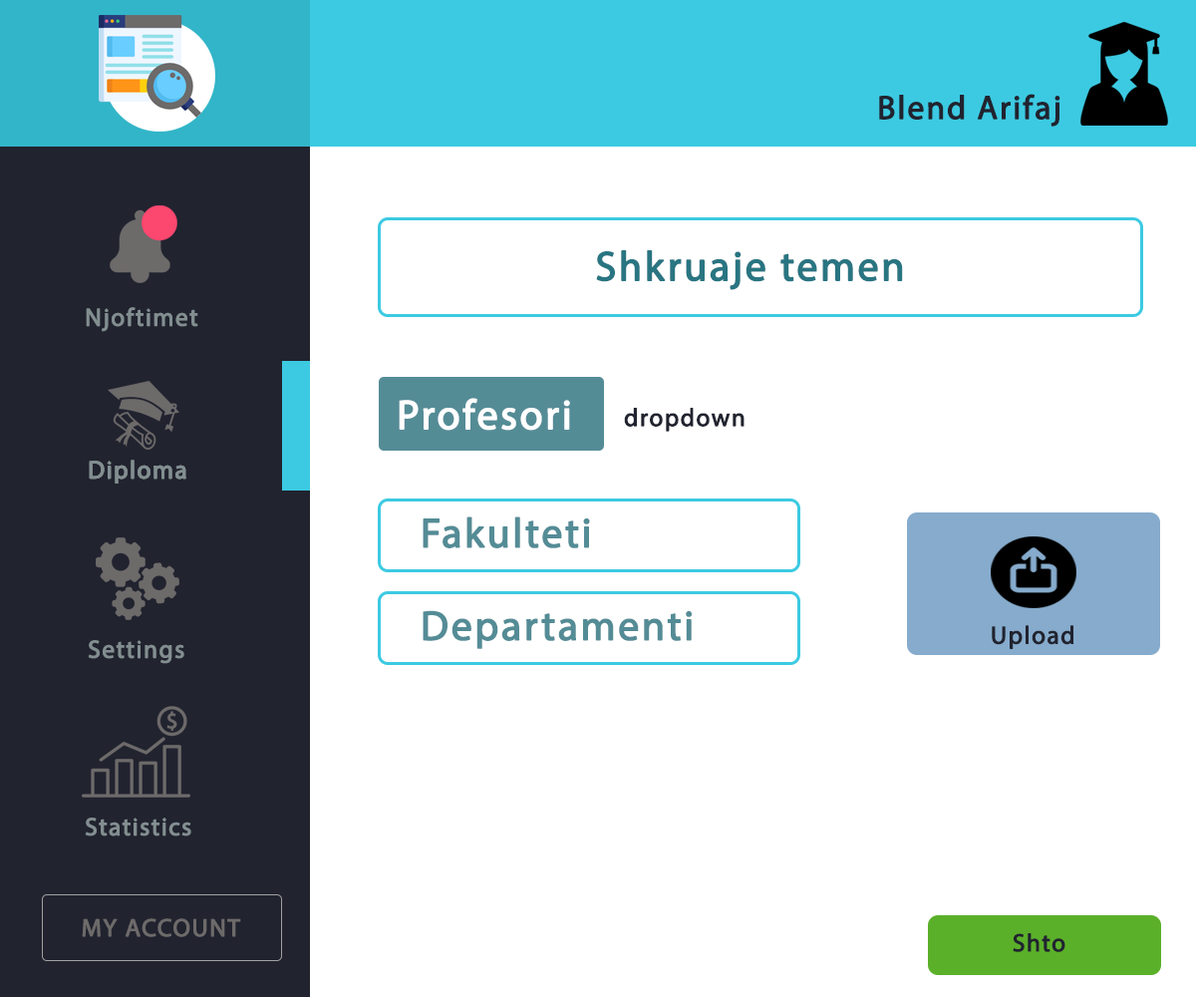
<style>
.page{position:relative;width:1196px;height:997px;background:#ffffff}
.page>*{position:absolute;margin:0}
.t1{font:33.2px "MyriadPro-Regular";letter-spacing:0.04em;color:#21232f;font-weight:bold}
.t2{font:41.5px "MyriadPro-Regular";letter-spacing:0.04em;color:#297582;font-weight:bold}
.t3{font:24.9px "MyriadPro-Regular";letter-spacing:0.04em;color:#828e90;font-weight:bold}
.t4{font:41.5px "MyriadPro-Regular";letter-spacing:0.04em;color:#ffffff;font-weight:bold}
.t5{font:24.9px "MyriadPro-Regular";letter-spacing:0.04em;color:#21232f;font-weight:bold}
.t6{font:41.5px "MyriadPro-Regular";letter-spacing:0.04em;color:#548c96;font-weight:bold}
.t7{font:24.9px "MyriadPro-Regular";letter-spacing:0.04em;color:#6d6a6a;font-weight:bold}
</style>
<div class="page">
<p class="t1" style="left:879px;top:94px;width:182px;height:33px">Blend Arifaj</p>
<p class="t2" style="left:596px;top:250px;width:307px;height:40px">Shkruaje temen</p>
<p class="t3" style="left:86px;top:307px;width:112px;height:25px">Njoftimet</p>
<p class="t4" style="left:399px;top:398px;width:171px;height:33px">Profesori</p>
<p class="t5" style="left:624px;top:408px;width:121px;height:24px">dropdown</p>
<p class="t3" style="left:89px;top:460px;width:97px;height:23px">Diploma</p>
<p class="t3" style="left:89px;top:460px;width:97px;height:23px">Diploma</p>
<p class="t6" style="left:423px;top:516px;width:167px;height:32px">Fakulteti</p>
<p class="t6" style="left:423px;top:610px;width:269px;height:39px">Departamenti</p>
<p class="t5" style="left:992px;top:625px;width:83px;height:24px">Upload</p>
<p class="t3" style="left:88px;top:640px;width:96px;height:24px">Settings</p>
<p class="t3" style="left:85px;top:817px;width:106px;height:19px">Statistics</p>
<p class="t7" style="left:82px;top:918px;width:159px;height:19px">MY ACCOUNT</p>
<p class="t5" style="left:1013px;top:933px;width:53px;height:19px">Shto</p>
</div>
